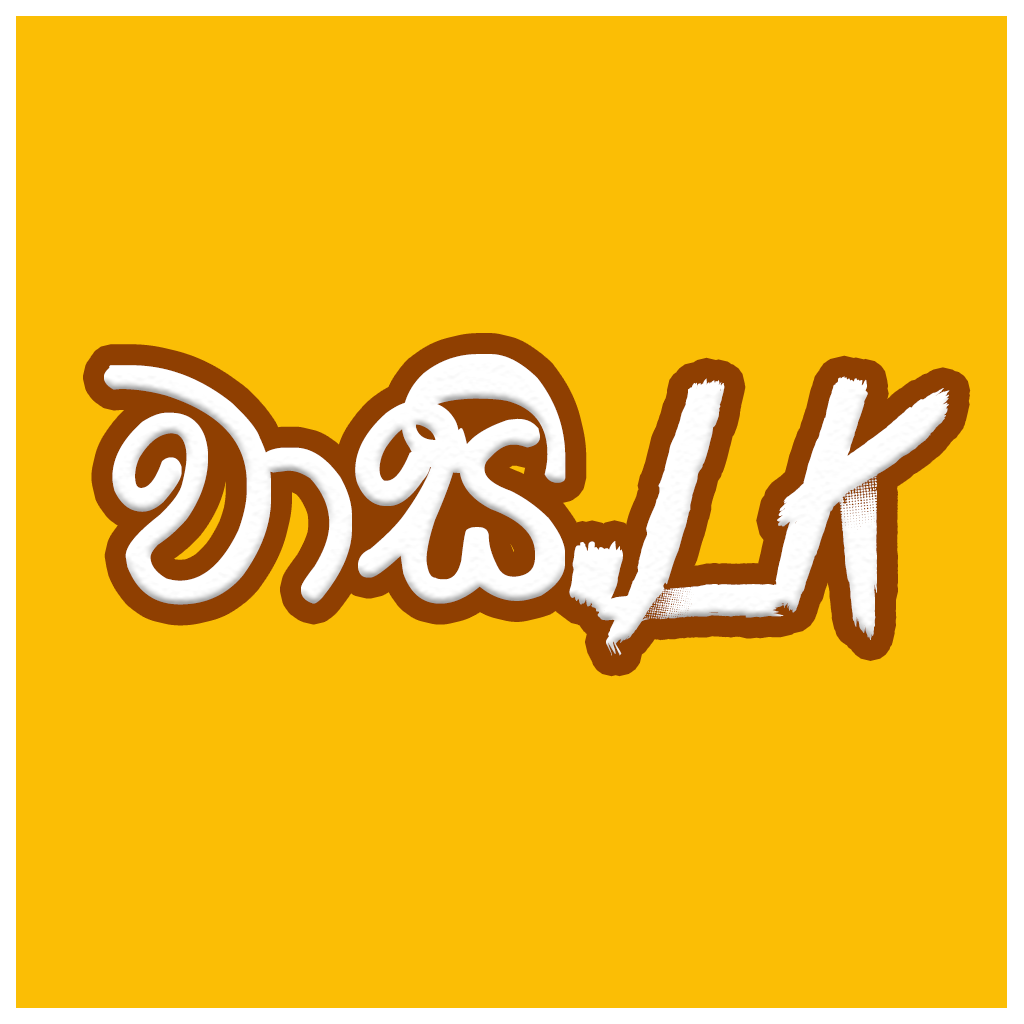
<style>
.page{position:relative;width:1024px;height:1024px;background:#fbbe05}
.page>*{position:absolute;margin:0}
.t1{font:273px "apex-a.pura-003";color:#fefefe}
.t2{font:273px "apex-a.pura-002";color:#fefefe}
.t3{font:273px "FromtheDead";color:#fefefe}
</style>
<div class="page">
<p class="t1" style="left:104px;top:354px;width:846px;height:302px">jdi<span class="t2">s</span><span class="t3">.lk</span></p>
</div>
